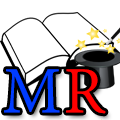
<style>
.page{position:relative;width:120px;height:120px;background:#ffffff}
.page>*{position:absolute;margin:0}
.t1{font:71.9px "AdobeDevanagari-Regular";letter-spacing:0.025em;color:#003cff}
.t2{font:71.9px "AdobeDevanagari-Regular";letter-spacing:0.025em;color:#ff0000}
</style>
<div class="page">
<p class="t1" style="left:4px;top:69px;width:102px;height:45px">M<span class="t2">R</span></p>
</div>
